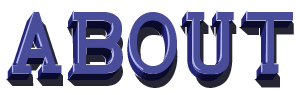
<style>
.page{position:relative;width:300px;height:95px;background:#ffffff}
.page>*{position:absolute;margin:0}
.t1{font:92.1px "Monstre-Midtone"}
.t2{font:92.1px "Monstre-Regular";color:#494c99}
.t3{font:92.1px "Monstre-CastShadow";color:#252533}
.t4{font:92.1px "Monstre-CoreShadow";color:#0a0b2a}
</style>
<div class="page">
<p class="t1" style="left:7px;top:12px;width:259px;height:69px">about</p>
<p class="t2" style="left:11px;top:12px;width:282px;height:62px">about</p>
<p class="t3" style="left:6px;top:19px;width:288px;height:69px">about</p>
<p class="t4" style="left:7px;top:20px;width:285px;height:61px">about</p>
</div>
